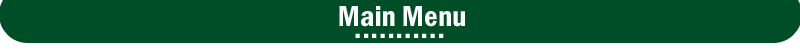
<style>
.page{position:relative;width:800px;height:50px;background:#004e27}
.page>*{position:absolute;margin:0}
.t1{font:30px "FranklinGothic-DemiCond";color:#fcfcfa}
.t2{font:30px "Arial-BoldMT";color:#f9fcfb}
</style>
<div class="page">
<p class="t1" style="left:339px;top:6px;width:126px;height:21px">Main Menu</p>
<p class="t2" style="left:355px;top:33px;width:89px;height:5px">...........</p>
</div>
